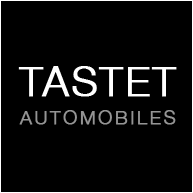
<style>
.page{position:relative;width:193px;height:193px;background:#000000}
.page>*{position:absolute;margin:0}
.t1{font:41.5px "HelveticaNeue-Light";letter-spacing:0.035em;color:#ffffff;font-weight:bold}
.t2{font:18.8px "HelveticaNeue-Light";letter-spacing:0.115em;color:#949494;font-weight:bold}
</style>
<div class="page">
<p class="t1" style="left:18px;top:66px;width:159px;height:31px">TASTET</p>
<p class="t2" style="left:19px;top:110px;width:157px;height:15px">AUTOMOBILES</p>
</div>
